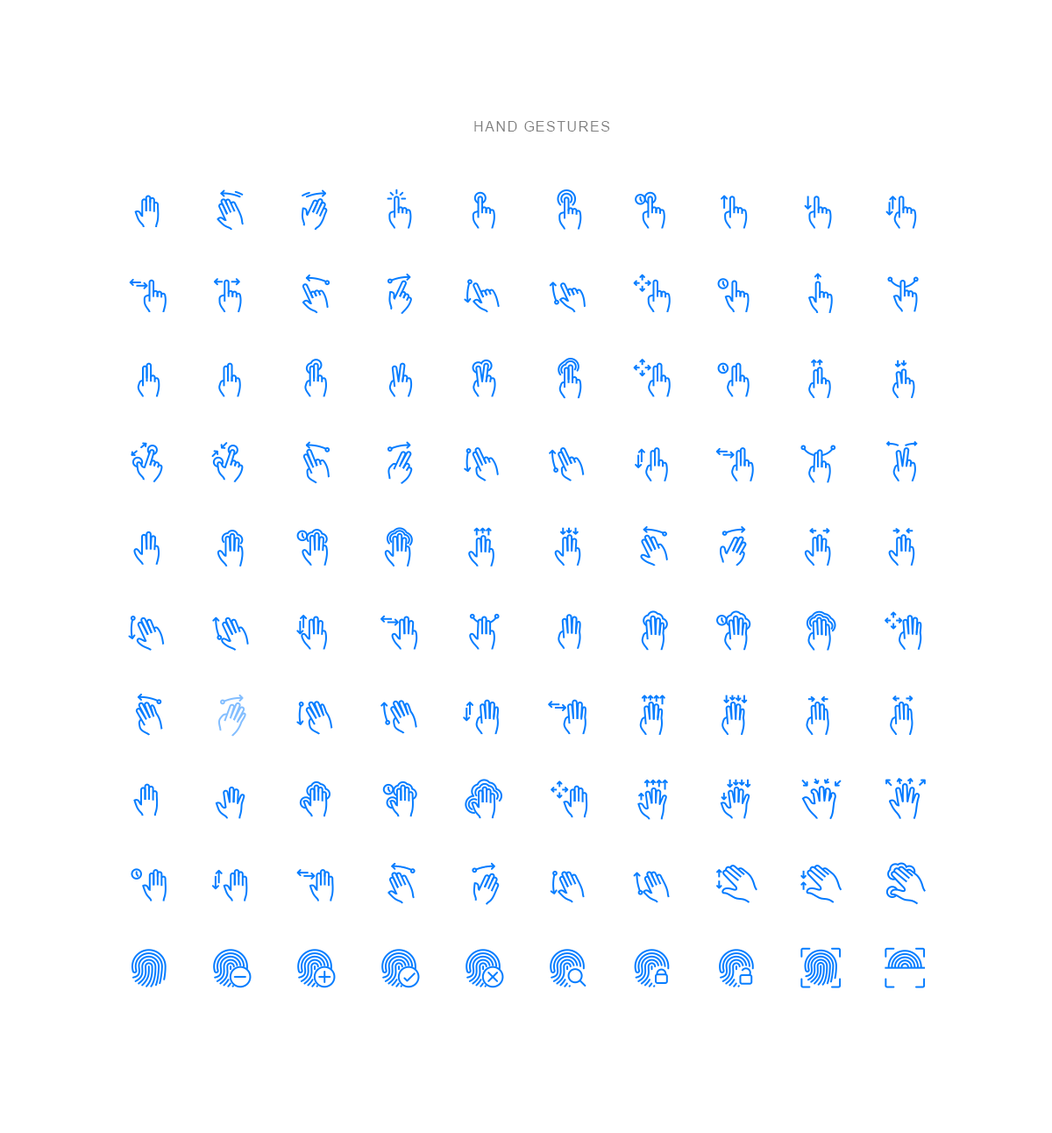
<style>
.page{position:relative;width:1052px;height:1133px;background:#ffffff}
.page>*{position:absolute;margin:0}
.t1{font:14px "ArialMT";letter-spacing:0.08em;color:#7f7f7f}
</style>
<div class="page">
<p class="t1" style="left:474px;top:121px;width:136px;height:11px">HAND GESTURES</p>
</div>
